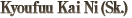
<style>
.page{position:relative;width:132px;height:18px;background:#ffffff}
.page>*{position:absolute;margin:0}
.t1{font:16px "RyuminPro-ExBold";letter-spacing:-0.08em;color:#4a3f32;font-weight:bold;scale:0.9 1}
</style>
<div class="page">
<p class="t1" style="left:0px;top:0px;width:128px;height:17px">Kyoufuu Kai Ni (Sk.)</p>
</div>
